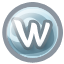
<style>
.page{position:relative;width:64px;height:64px;background:#ffffff}
.page>*{position:absolute;margin:0}
.t1{font:30px "SunnySide";color:#ffffff;font-variant:small-caps}
</style>
<div class="page">
<p class="t1" style="left:14px;top:20px;width:36px;height:28px">W</p>
</div>
